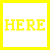
<style>
.page{position:relative;width:50px;height:50px;background:#ffffff}
.page>*{position:absolute;margin:0}
.t1{font:16.7px "Courier";letter-spacing:0.05em;color:#ffff00;font-weight:bold}
</style>
<div class="page">
<p class="t1" style="left:4px;top:19px;width:41px;height:12px">HERE</p>
</div>
